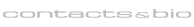
<style>
.page{position:relative;width:194px;height:27px;background:#ffffff}
.page>*{position:absolute;margin:0}
.t1{font:12.3px "MicroExtendFLF";color:#bebebe;font-weight:bold;scale:1.88 1}
.t2{font:8px "MicroExtendFLF";color:#bebebe;font-weight:bold;scale:1.88 1}
</style>
<div class="page">
<p class="t1" style="left:3px;top:9px;width:189px;height:9px">contacts <span class="t2">&amp; </span>bio</p>
</div>
